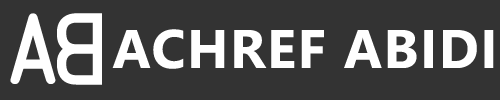
<style>
.page{position:relative;width:500px;height:100px;background:#333333}
.page>*{position:absolute;margin:0}
.t1{font:90.6px "OCRAStd";color:#ffffff;text-transform:uppercase}
.t2{font:91.4px "OCRAStd";color:#ffffff;text-transform:uppercase}
.t3{font:54.2px "NirmalaUI-Bold";letter-spacing:0.03em;color:#ffffff;text-transform:uppercase}
</style>
<div class="page">
<p class="t1" style="left:10px;top:13px;width:46px;height:71px">a</p>
<p class="t2" style="left:57px;top:13px;width:45px;height:72px;rotate:180deg">B</p>
<p class="t3" style="left:112px;top:29px;width:382px;height:40px">achref abidi</p>
</div>
